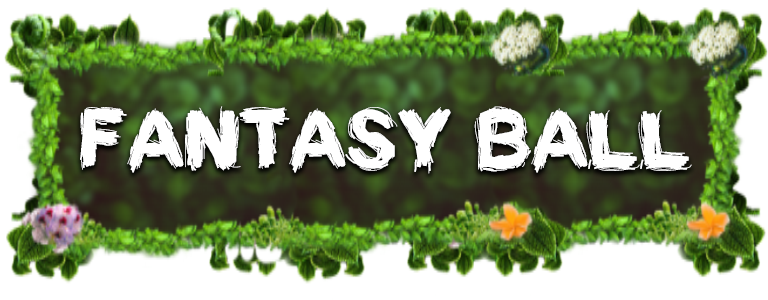
<style>
.page{position:relative;width:768px;height:300px;background:#ffffff}
.page>*{position:absolute;margin:0}
.t1{font:79.1px "SplinterWood";color:#ffffff}
</style>
<div class="page">
<p class="t1" style="left:80px;top:106px;width:612px;height:68px">FANTASY BALL</p>
</div>
